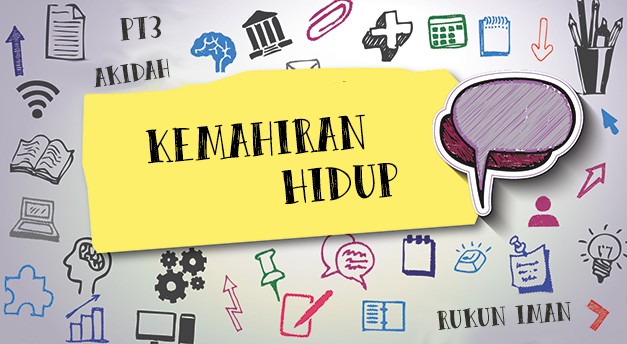
<style>
.page{position:relative;width:627px;height:344px;background:#fdef6a}
.page>*{position:absolute;margin:0}
.t1{font:36px "Peas&Carrots";letter-spacing:0.025em;color:#32312c}
.t2{font:30px "Peas&Carrots";letter-spacing:0.025em;color:#32312c}
.t3{font:55px "Peas&Carrots";letter-spacing:0.025em;color:#000000}
</style>
<div class="page">
<p class="t1" style="left:119px;top:16px;width:42px;height:25px;rotate:-4deg">pt3</p>
<p class="t2" style="left:94px;top:58px;width:76px;height:30px;rotate:-8deg">akidah</p>
<p class="t3" style="left:145px;top:114px;width:220px;height:50px;rotate:-4deg">Kemahiran</p>
<p class="t3" style="left:281px;top:163px;width:117px;height:42px;rotate:-4deg">Hidup</p>
<p class="t2" style="left:436px;top:301px;width:135px;height:29px;rotate:-4deg">rukun iman</p>
</div>
